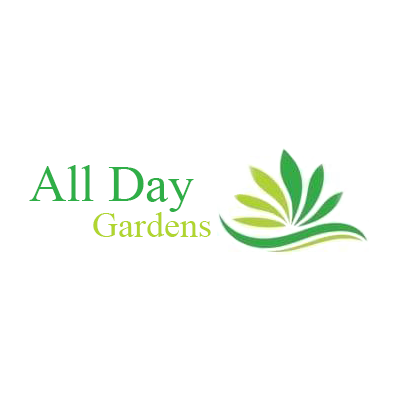
<style>
.page{position:relative;width:400px;height:400px;background:#ffffff}
.page>*{position:absolute;margin:0}
.t1{font:51.8px "TimesNewRomanPSMT";color:#2fae47}
.t2{font:35.9px "TimesNewRomanPSMT";color:#b0d530}
</style>
<div class="page">
<p class="t1" style="left:29px;top:165px;width:165px;height:47px">All Day</p>
<p class="t2" style="left:93px;top:212px;width:118px;height:25px">Gardens</p>
</div>
